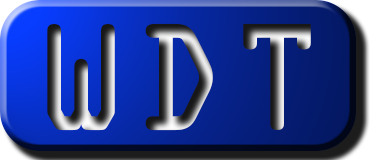
<style>
.page{position:relative;width:370px;height:160px}
.page>*{position:absolute;margin:0}
.t1{font:136.4px "OCRAStd"}
</style>
<div class="page">
<p class="t1" style="left:47px;top:23px;width:264px;height:108px">WDT</p>
</div>
